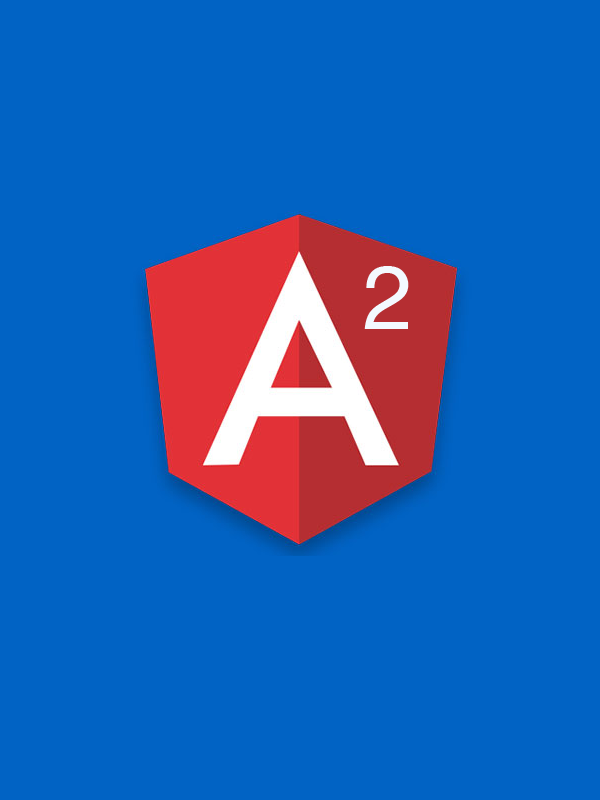
<style>
.page{position:relative;width:600px;height:800px;background:#0163c4}
.page>*{position:absolute;margin:0}
.t1{font:90px "Helvetica";color:#f3f9ff}
</style>
<div class="page">
<p class="t1" style="left:364px;top:266px;width:45px;height:63px">2</p>
</div>
